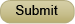
<style>
.page{position:relative;width:75px;height:24px}
.page>*{position:absolute;margin:0}
.t1{font:12.5px "ArialMT";letter-spacing:0.05em;color:#000000}
</style>
<div class="page">
<p class="t1" style="left:16px;top:5px;width:42px;height:10px">Submit</p>
</div>
